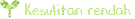
<style>
.page{position:relative;width:135px;height:19px;background:#ffffff}
.page>*{position:absolute;margin:0}
.t1{font:16px "DJBChalkItUp";color:#c5e686}
</style>
<div class="page">
<p class="t1" style="left:25px;top:2px;width:106px;height:14px">Kesulitan rendah</p>
</div>
